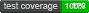
<style>
.page{position:relative;width:89px;height:13px}
.page>*{position:absolute;margin:0}
.t1{font:10px "ArialMT";color:#cccccc;scale:0.9 1}
.t2{font:8px "Helvetica";color:#ffffff}
</style>
<div class="page">
<p class="t1" style="left:3px;top:2px;width:55px;height:9px">test coverage</p>
<p class="t2" style="left:65px;top:3px;width:21px;height:6px">100%</p>
<p class="t2" style="left:72px;top:2px;width:14px;height:7px">???</p>
</div>
